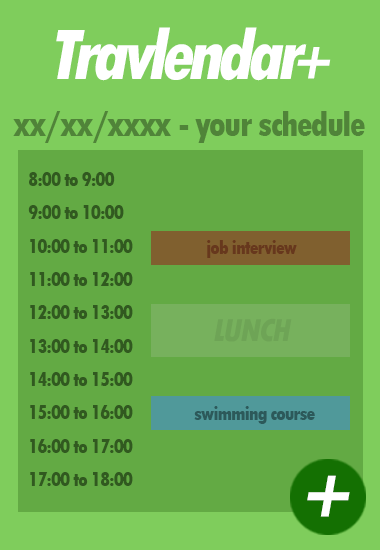
<style>
.page{position:relative;width:380px;height:550px;background:#63aa44}
.page>*{position:absolute;margin:0}
.t1{font:75px "TwCenMT-CondensedExtraBold";letter-spacing:-0.075em;color:#ffffff;font-style:italic}
.t2{font:58.3px "TwCenMT-CondensedExtraBold";letter-spacing:-0.075em;color:#ffffff;font-style:italic}
.t3{font:37.5px "TwCenMT-CondensedExtraBold";letter-spacing:-0.05em;color:#508439}
.t4{font:20.8px/33.3px "TwCenMT-CondensedExtraBold";letter-spacing:-0.05em;color:#315920}
.t5{font:20.8px "TwCenMT-CondensedExtraBold";letter-spacing:-0.05em;color:#67381d}
.t6{font:33.3px "TwCenMT-CondensedExtraBold";letter-spacing:-0.05em;color:#6ea456;font-style:italic}
.t7{font:20.8px "TwCenMT-CondensedExtraBold";letter-spacing:-0.05em;color:#2c595a}
</style>
<div class="page">
<p class="t1" style="left:56px;top:27px;width:251px;height:54px">Travlendar</p>
<p class="t2" style="left:297px;top:47px;width:34px;height:32px">+</p>
<p class="t3" style="left:13px;top:111px;width:352px;height:32px">xx/xx/xxxx - your schedule</p>
<p class="t4" style="left:28px;top:172px;width:105px;height:314px">8:00 to 9:00<br>9:00 to 10:00<br>10:00 to 11:00<br>11:00 to 12:00<br>12:00 to 13:00<br>13:00 to 14:00<br>14:00 to 15:00<br>15:00 to 16:00<br>16:00 to 17:00<br>17:00 to 18:00</p>
<p class="t5" style="left:207px;top:240px;width:90px;height:18px">job interview</p>
<p class="t6" style="left:214px;top:318px;width:78px;height:24px">LUNCH</p>
<p class="t7" style="left:194px;top:406px;width:121px;height:18px">swimming course</p>
<p class="t1" style="left:307px;top:475px;width:43px;height:42px">+</p>
</div>
